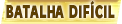
<style>
.page{position:relative;width:122px;height:24px;background:#5d4003}
.page>*{position:absolute;margin:0}
.t1{font:16px "RodinNTLGPro-UB";letter-spacing:0.015em;color:#5d4003;scale:0.7 1}
</style>
<div class="page">
<p class="t1" style="left:6px;top:0px;width:109px;height:19px">BATALHA DIFÍCIL</p>
</div>
